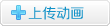
<style>
.page{position:relative;width:110px;height:26px}
.page>*{position:absolute;margin:0}
.t1{font:14px "FZZXHJW--GB1-0";color:#1091c7}
</style>
<div class="page">
<p class="t1" style="left:28px;top:6px;width:56px;height:14px">上传动画</p>
</div>
